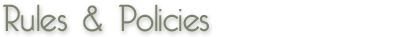
<style>
.page{position:relative;width:400px;height:37px;background:#ffffff}
.page>*{position:absolute;margin:0}
.t1{font:36.8px "BelleroseLight";color:#7c836c}
</style>
<div class="page">
<p class="t1" style="left:2px;top:4px;width:207px;height:28px">Rules &amp; Policies</p>
</div>
